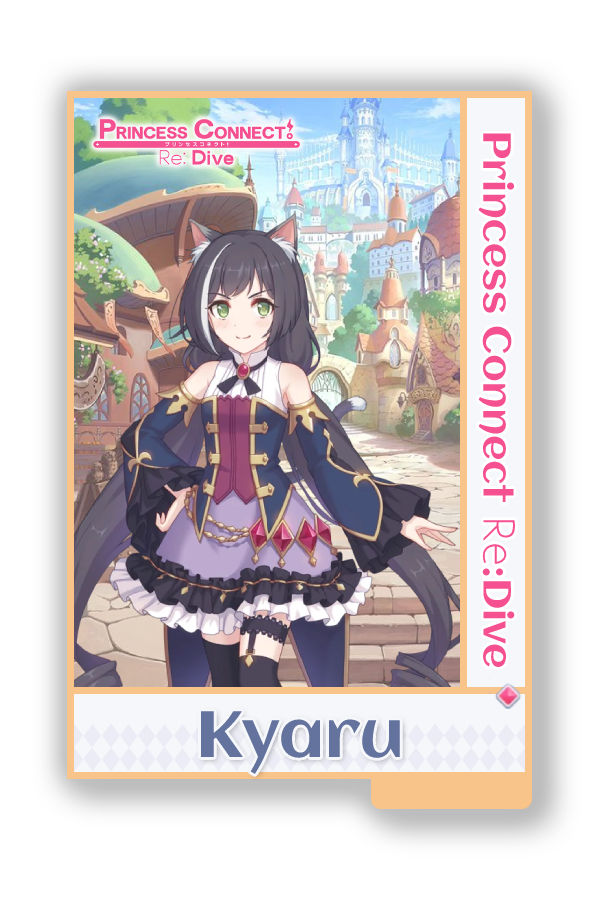
<style>
.page{position:relative;width:600px;height:900px;background:#ffffff}
.page>*{position:absolute;margin:0}
.t1{font:39px "Aclonica-Regular";color:#f55191}
.t2{font:39px "AaarghNormal";color:#f55191}
.t3{font:65px "Aclonica-Regular";color:#64739d}
</style>
<div class="page">
<p class="t1" style="left:478px;top:133px;width:38px;height:534px;rotate:90deg">Princess Connect <span class="t2">Re</span>:Dive</p>
<p class="t3" style="left:201px;top:711px;width:199px;height:63px">Kyaru</p>
</div>
